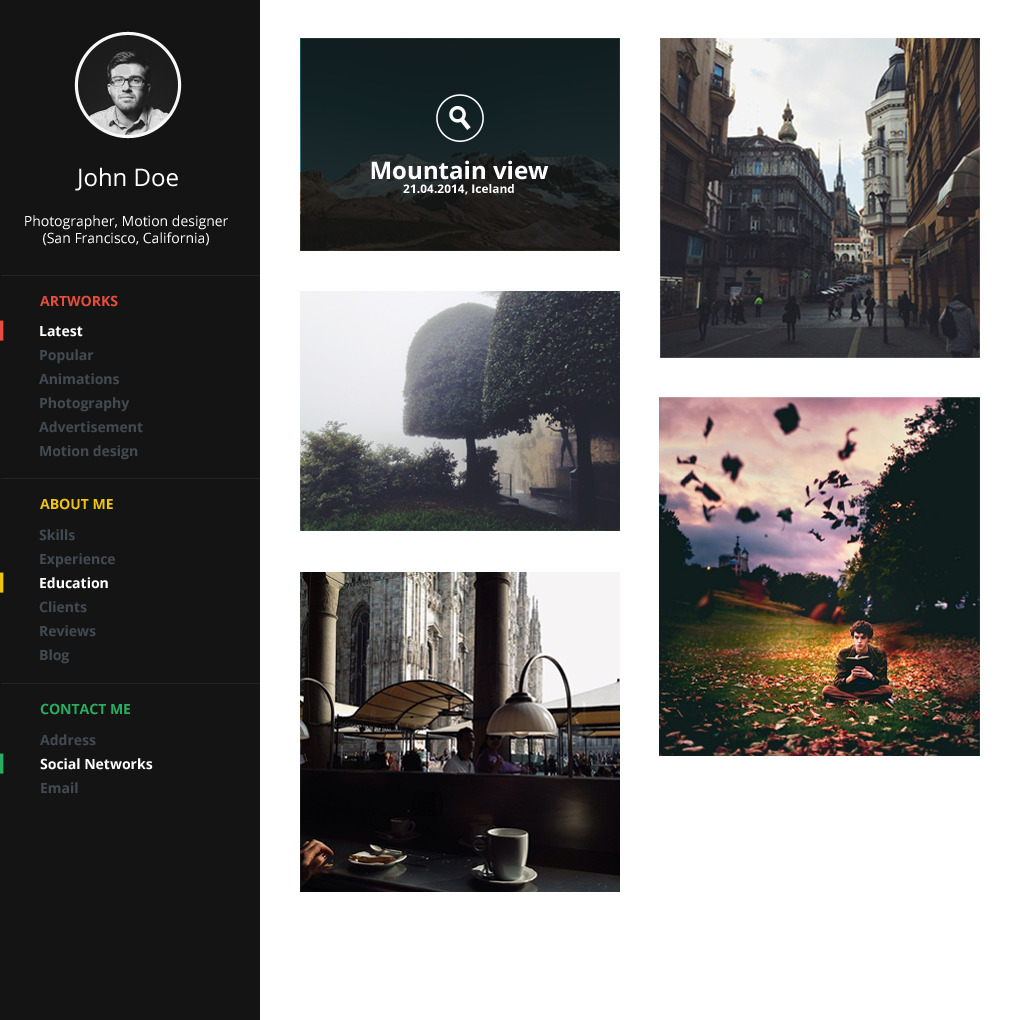
<style>
.page{position:relative;width:1020px;height:1020px;background:#ffffff}
.page>*{position:absolute;margin:0}
.t1{font:12px "OpenSans-Bold";color:#ffffff}
.t2{font:24px "OpenSans-Bold";color:#ffffff}
.t3{font:24px "OpenSans";color:#ffffff}
.t4{font:14px "OpenSans";color:#ffffff}
.t5{font:14px "OpenSans-Bold";color:#e74c3c}
.t6{font:14px/24px "OpenSans-Bold";color:#424a51}
.t7{font:14px/24px "OpenSans-Bold";color:#ffffff}
.t8{font:14px "OpenSans-Bold";color:#f1c40f}
.t9{font:14px "OpenSans-Bold";color:#27ae60}
.t10{font:14px/24px "OpenSans-Bold";color:#fefefe}
</style>
<div class="page">
<p class="t1" style="left:371px;top:160px;width:178px;height:35px;text-align:center"><span class="t2">Mountain view<br></span>21.04.2014, Iceland</p>
<p class="t3" style="left:75px;top:167px;width:103px;height:24px">John Doe</p>
<p class="t4" style="left:25px;top:215px;width:203px;height:31px;text-align:center">Photographer, Motion designer<br>(San Francisco, California)</p>
<p class="t5" style="left:40px;top:295px;width:78px;height:12px">ARTWORKS</p>
<p class="t6" style="left:39px;top:326px;width:104px;height:134px"><span class="t7">Latest<br></span>Popular<br>Animations<br>Photography<br>Advertisement<br>Motion design</p>
<p class="t8" style="left:40px;top:498px;width:73px;height:12px">ABOUT ME</p>
<p class="t6" style="left:39px;top:529px;width:76px;height:135px">Skills<br>Experience<br><span class="t7">Education<br></span>Clients<br>Reviews<br>Blog</p>
<p class="t9" style="left:40px;top:703px;width:90px;height:12px">CONTACT ME</p>
<p class="t10" style="left:40px;top:734px;width:113px;height:60px"><span class="t6">Address<br></span>Social Networks<br><span class="t6">Email</span></p>
</div>
